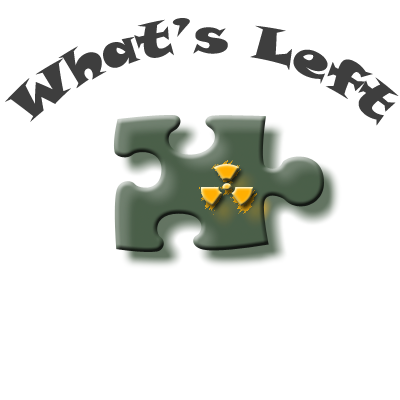
<style>
.page{position:relative;width:400px;height:400px;background:#ffffff}
.page>*{position:absolute;margin:0}
.t1{font:48px "SnapITC-Regular";color:#3e3e3e}
</style>
<div class="page">
<p class="t1" style="left:5px;top:18px;width:394px;height:108px;text-align:center">What’s Left</p>
</div>
